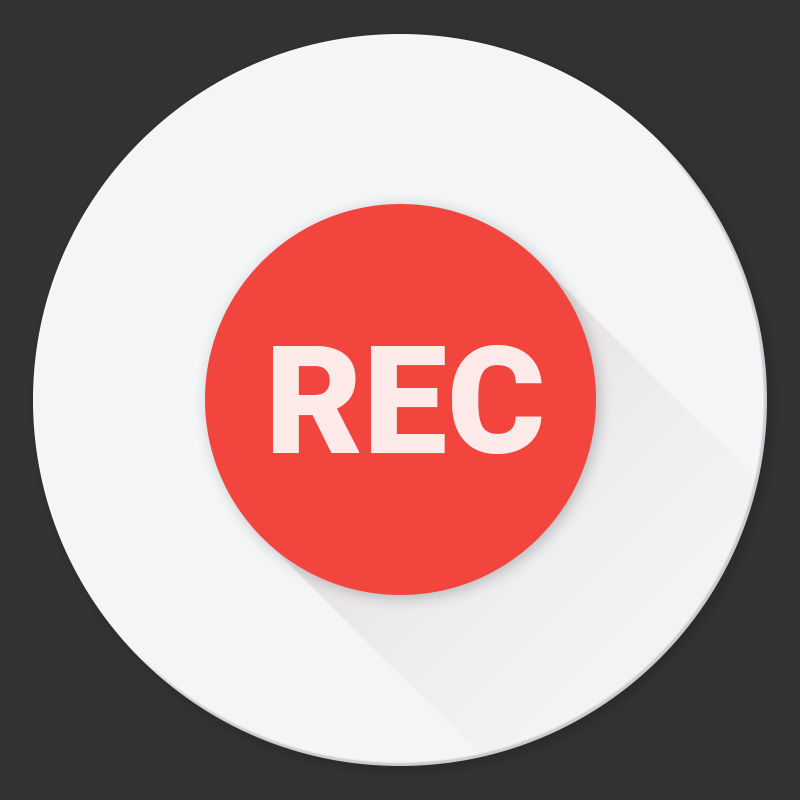
<style>
.page{position:relative;width:800px;height:800px;background:#f3f5f7}
.page>*{position:absolute;margin:0}
.t1{font:150px "Roboto-Black";color:#ffffff}
</style>
<div class="page">
<p class="t1" style="left:273px;top:345px;width:269px;height:109px;opacity:0.85">REC</p>
</div>
